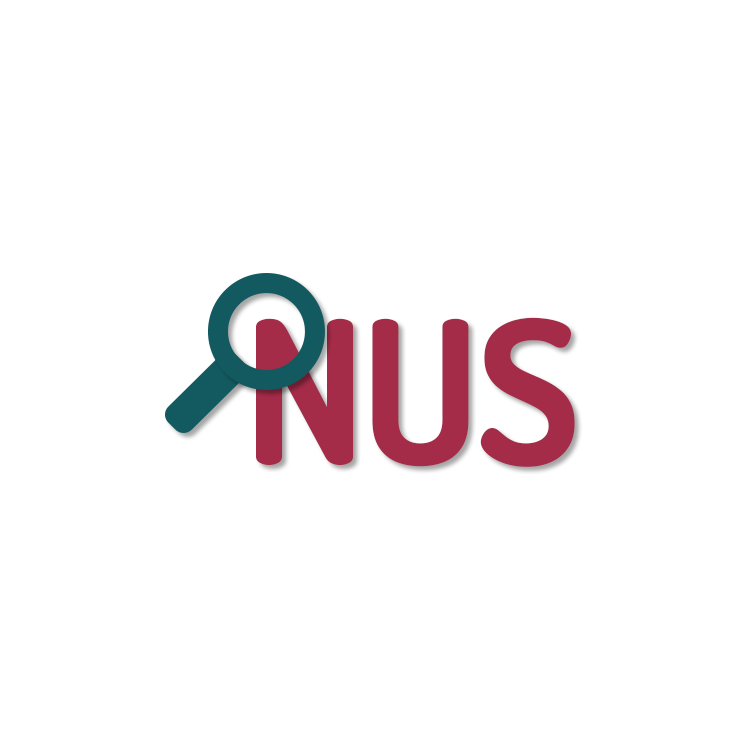
<style>
.page{position:relative;width:740px;height:740px;background:#ffffff}
.page>*{position:absolute;margin:0}
.t1{font:200px "Dosis-Bold";letter-spacing:-0.02em;color:#a52c49}
</style>
<div class="page">
<p class="t1" style="left:256px;top:317px;width:319px;height:150px">NUS</p>
</div>
